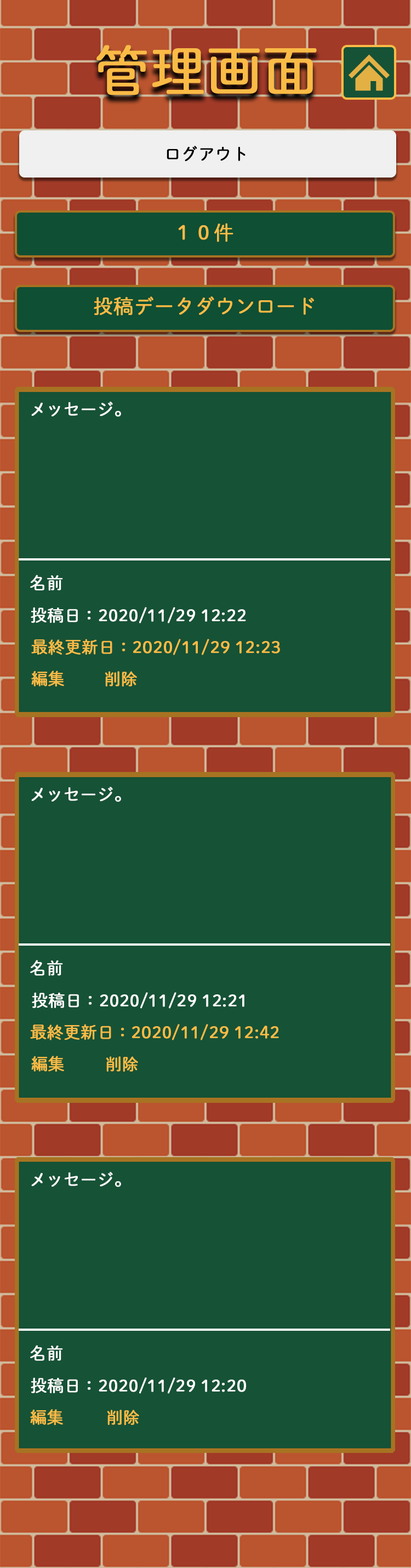
<style>
.page{position:relative;width:411px;height:1568px;background:#165236}
.page>*{position:absolute;margin:0}
.t1{font:54.8px "DNPShueiMGoStd-L";color:#fabb46;font-weight:bold}
.t2{font:16.4px "DNPShueiMGoStd-L";color:#000000;font-weight:bold}
.t3{font:19.7px "DNPShueiMGoStd-L";color:#fabb46;font-weight:bold}
.t4{font:16.4px "DNPShueiMGoStd-L";color:#fefefe;font-weight:bold}
.t5{font:16.4px "DNPShueiMGoStd-L";color:#ffffff;font-weight:bold}
.t6{font:16.4px "DNPShueiMGoStd-L";color:#fabb46;font-weight:bold}
</style>
<div class="page">
<p class="t1" style="left:96px;top:45px;width:221px;height:50px">管理画面</p>
<p class="t2" style="left:167px;top:146px;width:78px;height:15px">ログアウト</p>
<p class="t3" style="left:178px;top:223px;width:55px;height:19px">１０件</p>
<p class="t3" style="left:94px;top:296px;width:220px;height:20px">投稿データダウンロード</p>
<p class="t4" style="left:31px;top:402px;width:90px;height:15px">メッセージ。</p>
<p class="t5" style="left:30px;top:575px;width:33px;height:16px">名前</p>
<p class="t4" style="left:31px;top:607px;width:215px;height:16px">投稿日：2020/11/29 12:22</p>
<p class="t6" style="left:31px;top:639px;width:249px;height:16px">最終更新日：2020/11/29 12:23</p>
<p class="t6" style="left:31px;top:671px;width:33px;height:16px">編集</p>
<p class="t6" style="left:105px;top:671px;width:32px;height:16px">削除</p>
<p class="t4" style="left:31px;top:787px;width:90px;height:15px">メッセージ。</p>
<p class="t5" style="left:30px;top:960px;width:33px;height:16px">名前</p>
<p class="t4" style="left:32px;top:992px;width:212px;height:17px">投稿日：2020/11/29 12:21</p>
<p class="t6" style="left:30px;top:1024px;width:249px;height:16px">最終更新日：2020/11/29 12:42</p>
<p class="t6" style="left:31px;top:1056px;width:33px;height:16px">編集</p>
<p class="t6" style="left:106px;top:1056px;width:32px;height:16px">削除</p>
<p class="t4" style="left:31px;top:1172px;width:90px;height:15px">メッセージ。</p>
<p class="t5" style="left:30px;top:1345px;width:33px;height:16px">名前</p>
<p class="t4" style="left:31px;top:1377px;width:215px;height:17px">投稿日：2020/11/29 12:20</p>
<p class="t6" style="left:30px;top:1409px;width:33px;height:17px">編集</p>
<p class="t6" style="left:107px;top:1410px;width:32px;height:16px">削除</p>
</div>
